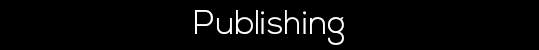
<style>
.page{position:relative;width:539px;height:50px;background:#000000}
.page>*{position:absolute;margin:0}
.t1{font:33.1px "NexaLight";color:#ffffff}
</style>
<div class="page">
<p class="t1" style="left:195px;top:10px;width:149px;height:35px">Publishing</p>
</div>
